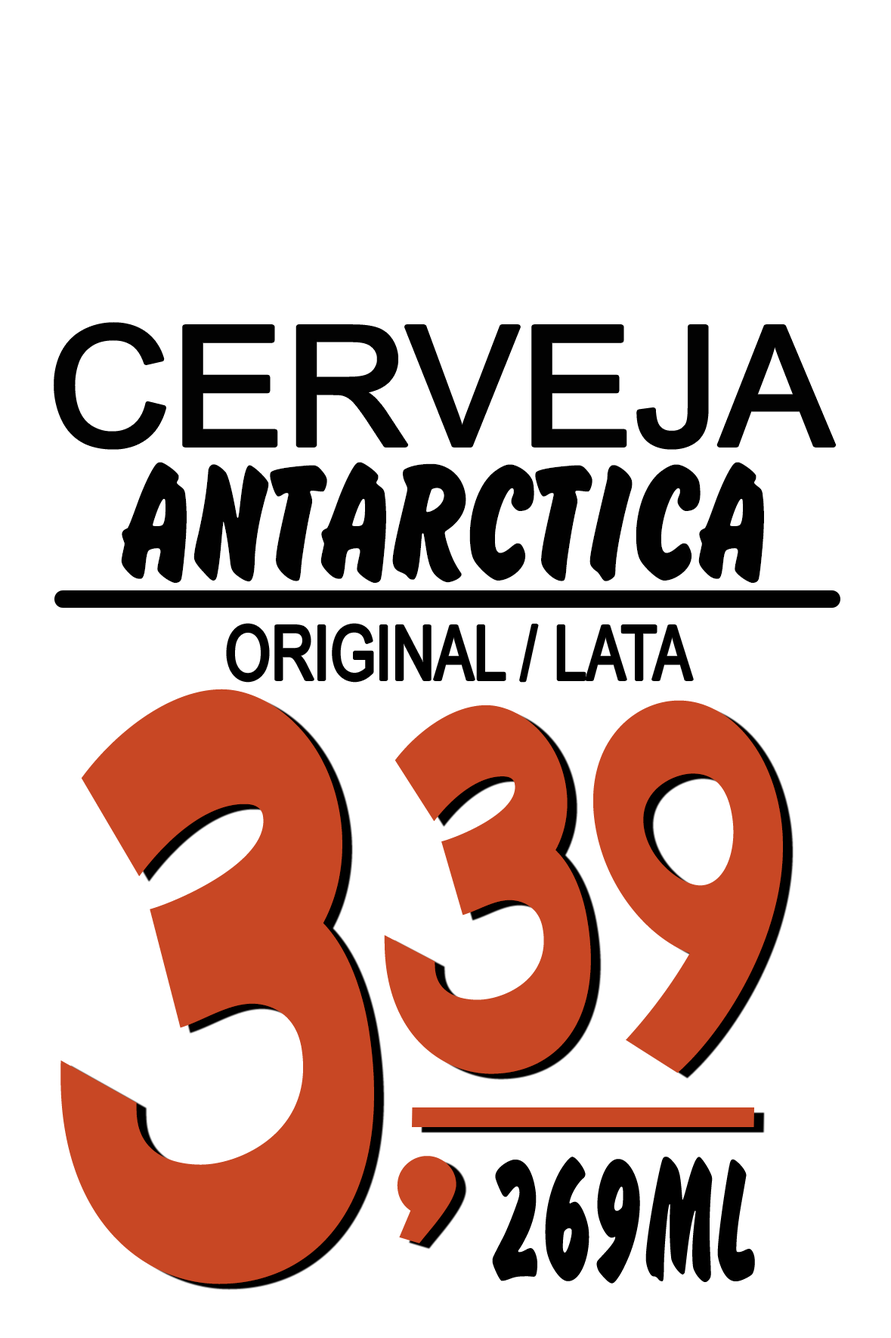
<style>
.page{position:relative;width:891px;height:1338px;background:#ffffff}
.page>*{position:absolute;margin:0}
.t1{font:165.6px "ArialMT";letter-spacing:0.002em;color:#020202;scale:1.03 1}
.t2{font:174.7px "BrushHandNew";letter-spacing:0.002em;color:#010101;scale:0.83 1}
.t3{font:74.8px "ArialMT";letter-spacing:0.002em;color:#000000;scale:0.78 1}
.t4{font:762.4px "Zullia";letter-spacing:0.002em;color:#c84724;scale:0.62 1}
.t5{font:474.5px "Zullia";letter-spacing:0.002em;color:#c84724;scale:0.65 1}
.t6{font:423.3px "Zullia";letter-spacing:0.002em;color:#c84724}
.t7{font:183.1px "BrushHandNew";letter-spacing:0.002em;color:#000000;scale:0.57 1}
</style>
<div class="page">
<p class="t1" style="left:56px;top:324px;width:779px;height:124px">CERVEJA</p>
<p class="t2" style="left:121px;top:462px;width:643px;height:121px">ANTARCTICA</p>
<p class="t3" style="left:228px;top:624px;width:464px;height:57px">ORIGINAL / LATA</p>
<p class="t4" style="left:60px;top:689px;width:314px;height:595px">3</p>
<p class="t5" style="left:384px;top:700px;width:399px;height:374px">39</p>
<p class="t6" style="left:397px;top:1156px;width:60px;height:87px">,</p>
<p class="t7" style="left:492px;top:1157px;width:263px;height:127px">269ML</p>
</div>
